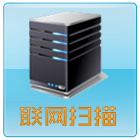
<style>
.page{position:relative;width:140px;height:140px}
.page>*{position:absolute;margin:0}
.t1{font:23.3px "ZHSRXT--GBK1-0";scale:1.06 1}
</style>
<div class="page">
<p class="t1" style="left:19px;top:106px;width:97px;height:20px">联网扫描</p>
</div>
